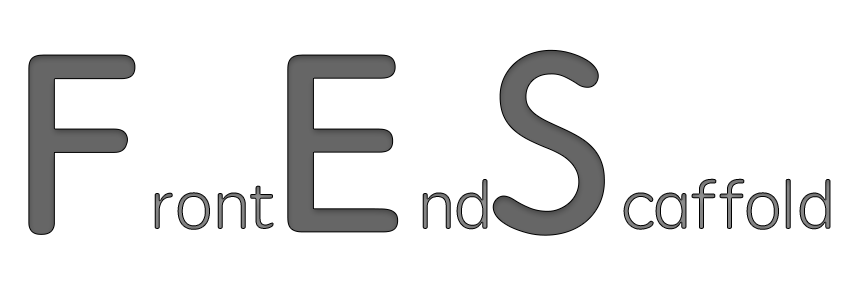
<style>
.page{position:relative;width:850px;height:300px;background:#ffffff}
.page>*{position:absolute;margin:0}
.t1{font:66.7px "STYuanti-TC-Regular";color:#9a9a9a}
.t2{font:250px "STYuanti-TC-Regular";color:#666666;font-weight:bold}
</style>
<div class="page">
<p class="t1" style="left:28px;top:49px;width:803px;height:187px"><span class="t2">F</span>ront<span class="t2">E</span>nd<span class="t2">S</span>caffold</p>
</div>
